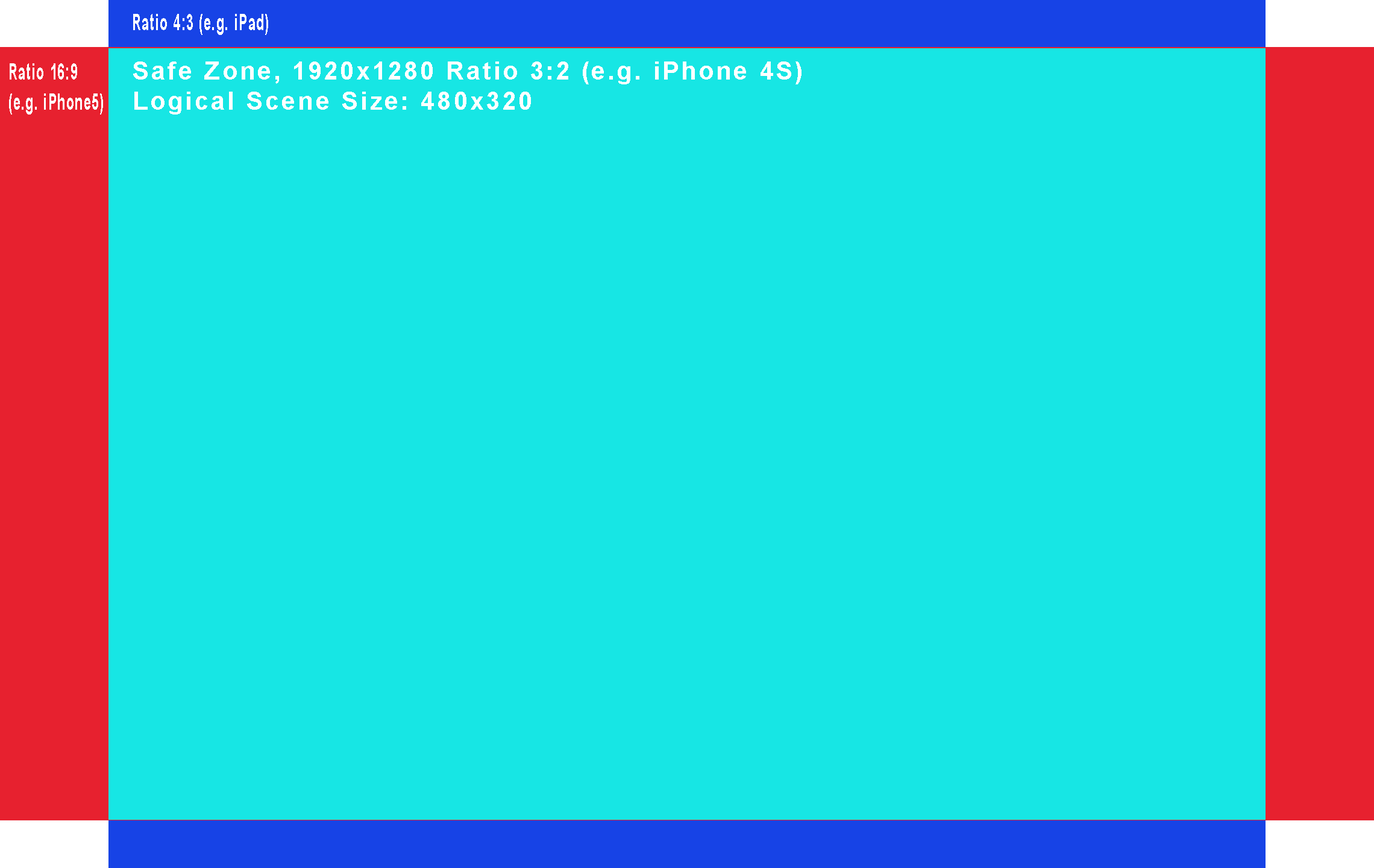
<style>
.page{position:relative;width:1374px;height:868px;background:#17e6e4}
.page>*{position:absolute;margin:0}
.t1{font:22.6px "Arial-BoldMT";letter-spacing:0.1em;color:#ffffff;scale:0.55 1}
.t2{font:25.1px "Arial-BoldMT";letter-spacing:0.1em;color:#ffffff}
</style>
<div class="page">
<p class="t1" style="left:133px;top:14px;width:135px;height:21px">Ratio 4:3 (e.g. iPad)</p>
<p class="t1" style="left:9px;top:63px;width:94px;height:52px">Ratio 16:9 <br>(e.g. iPhone5)</p>
<p class="t2" style="left:133px;top:61px;width:669px;height:54px">Safe Zone, 1920x1280 Ratio 3:2 (e.g. iPhone 4S)<br>Logical Scene Size: 480x320</p>
</div>
